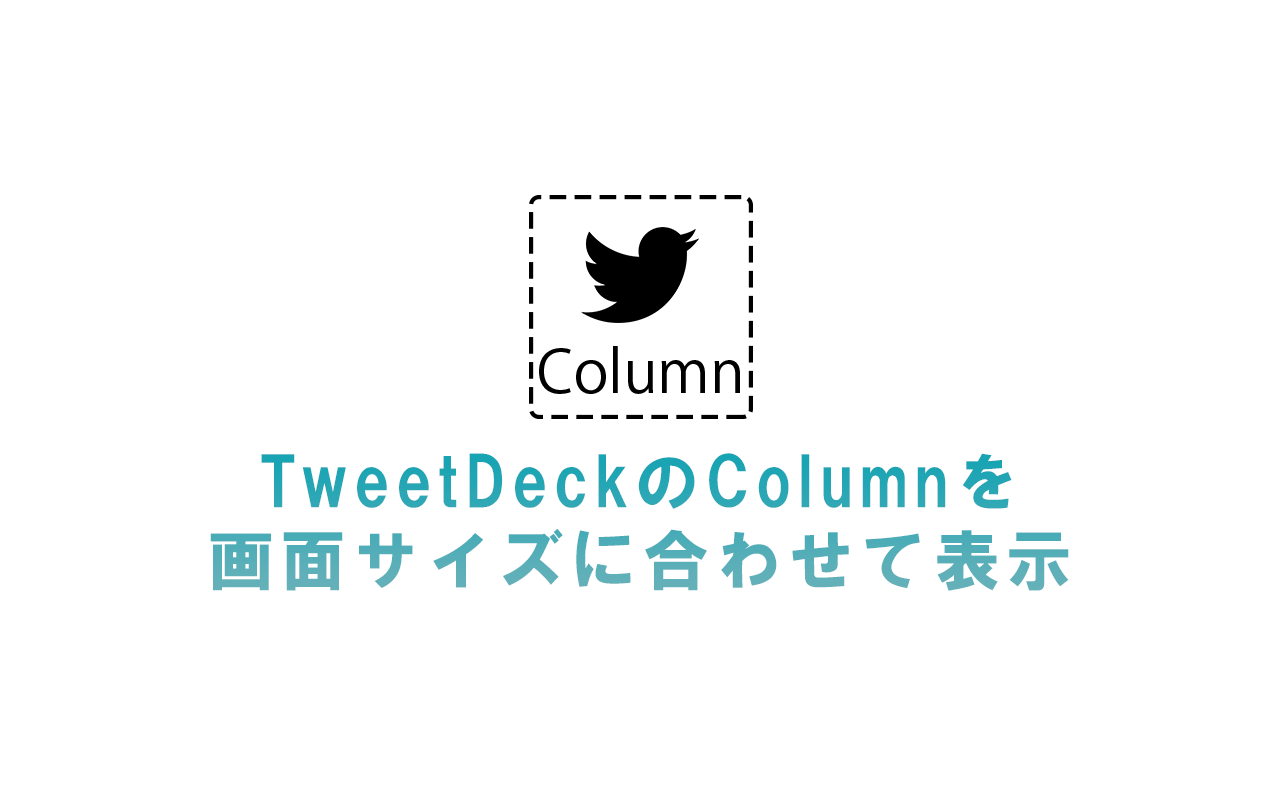
<style>
.page{position:relative;width:1280px;height:800px;background:#ffffff}
.page>*{position:absolute;margin:0}
.t1{font:66px "HGSSoeiKakugothicUB";letter-spacing:0.1em}
</style>
<div class="page">
<p class="t1" style="left:210px;top:453px;width:859px;height:138px;text-align:center">TweetDeckのColumnを<br>画面サイズに合わせて表示</p>
</div>
